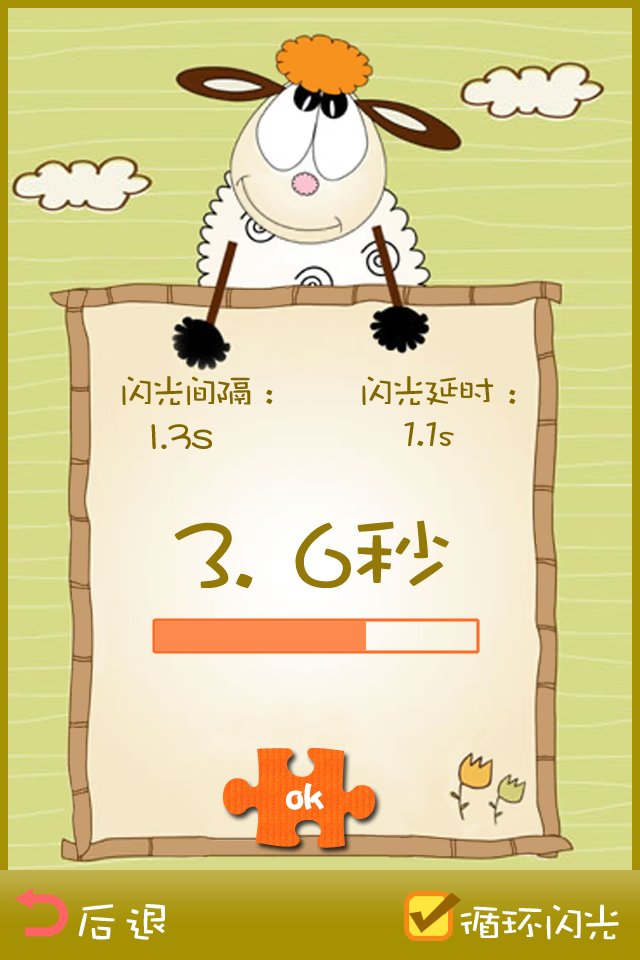
<style>
.page{position:relative;width:640px;height:960px}
.page>*{position:absolute;margin:0}
.t1{font:37.5px/41.7px "DFPWaWaW5";color:#816700;scale:1.11 1}
.t2{font:37.5px/41.7px "DFPShaoNvW5";color:#816700;scale:1.11 1}
.t3{font:101.2px "DFPWaWaW5";color:#947808;scale:1.11 1}
.t4{font:37.5px "Jtaiji";color:#ffffff;scale:1.11 1}
.t5{font:50px "DFPWaWaW5";color:#ffffff}
.t6{font:45px "DFPWaWaW5";color:#ffffff;scale:1.11 1}
</style>
<div class="page">
<p class="t1" style="left:122px;top:376px;width:151px;height:73px">闪光间隔 :<br>  <span class="t2">1.3s</span></p>
<p class="t1" style="left:362px;top:376px;width:154px;height:70px">闪光延时 :<br>   1.1s</p>
<p class="t3" style="left:174px;top:520px;width:275px;height:68px">3. 6秒</p>
<p class="t4" style="left:286px;top:783px;width:38px;height:27px">ok</p>
<p class="t5" style="left:78px;top:904px;width:87px;height:36px">后退</p>
<p class="t6" style="left:460px;top:904px;width:159px;height:36px">循环闪光</p>
</div>
